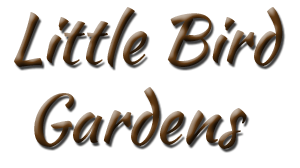
<style>
.page{position:relative;width:300px;height:168px;background:#ffffff}
.page>*{position:absolute;margin:0}
.t1{font:66.4px "KaushanScript-Regular"}
</style>
<div class="page">
<p class="t1" style="left:14px;top:7px;width:269px;height:142px">Little Bird<br> Gardens</p>
</div>
